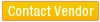
<style>
.page{position:relative;width:100px;height:22px}
.page>*{position:absolute;margin:0}
.t1{font:14px "HelveticaNeueLTStd-Cn";letter-spacing:0.04em;color:#ffffff}
</style>
<div class="page">
<p class="t1" style="left:8px;top:5px;width:86px;height:11px">Contact Vendor</p>
</div>
